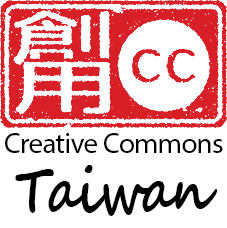
<style>
.page{position:relative;width:227px;height:228px;background:#ffffff}
.page>*{position:absolute;margin:0}
.t1{font:29.2px "MyriadPro-Regular";letter-spacing:-0.025em;color:#000000}
.t2{font:62.5px "SegoeScript-Bold";letter-spacing:-0.05em;color:#000000;scale:0.8 1}
</style>
<div class="page">
<p class="t1" style="left:5px;top:133px;width:218px;height:20px">Creative Commons</p>
<p class="t2" style="left:15px;top:165px;width:203px;height:51px">Taiwan</p>
</div>
